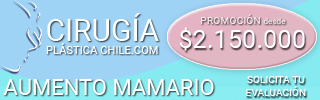
<style>
.page{position:relative;width:320px;height:100px;background:#9fd3f6}
.page>*{position:absolute;margin:0}
.t1{font:11.2px "Roboto-Regular";color:#fdffff}
.t2{font:30px "Roboto-Regular";color:#fdffff}
.t3{font:10.4px "Roboto-Regular";color:#f0eaea}
.t4{font:8.1px "Roboto-Regular";color:#f0eaea}
.t5{font:25.5px "Roboto-Regular";color:#ffffff}
.t6{font:10.4px "Roboto-Regular";letter-spacing:-0.01em;color:#ffffff}
.t7{font:22px "Roboto-Regular";color:#ffffff}
</style>
<div class="page">
<p class="t1" style="left:46px;top:13px;width:113px;height:41px;text-align:center"><span class="t2">CIRUGÍA<br></span>PLÁSTICA CHILE.COM</p>
<p class="t3" style="left:201px;top:14px;width:85px;height:11px">PROMOCIÓN <span class="t4">desde</span></p>
<p class="t5" style="left:179px;top:27px;width:126px;height:24px">$2.150.000</p>
<p class="t6" style="left:246px;top:76px;width:60px;height:20px;text-align:center">SOLICITA TU<br>EVALUACIÓN</p>
<p class="t7" style="left:3px;top:79px;width:211px;height:16px">AUMENTO MAMARIO</p>
</div>
